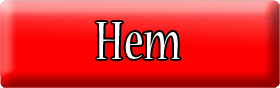
<style>
.page{position:relative;width:280px;height:88px}
.page>*{position:absolute;margin:0}
.t1{font:60px "NuevaStd-Cond";color:#ffffff}
</style>
<div class="page">
<p class="t1" style="left:96px;top:22px;width:84px;height:37px">Hem</p>
</div>
